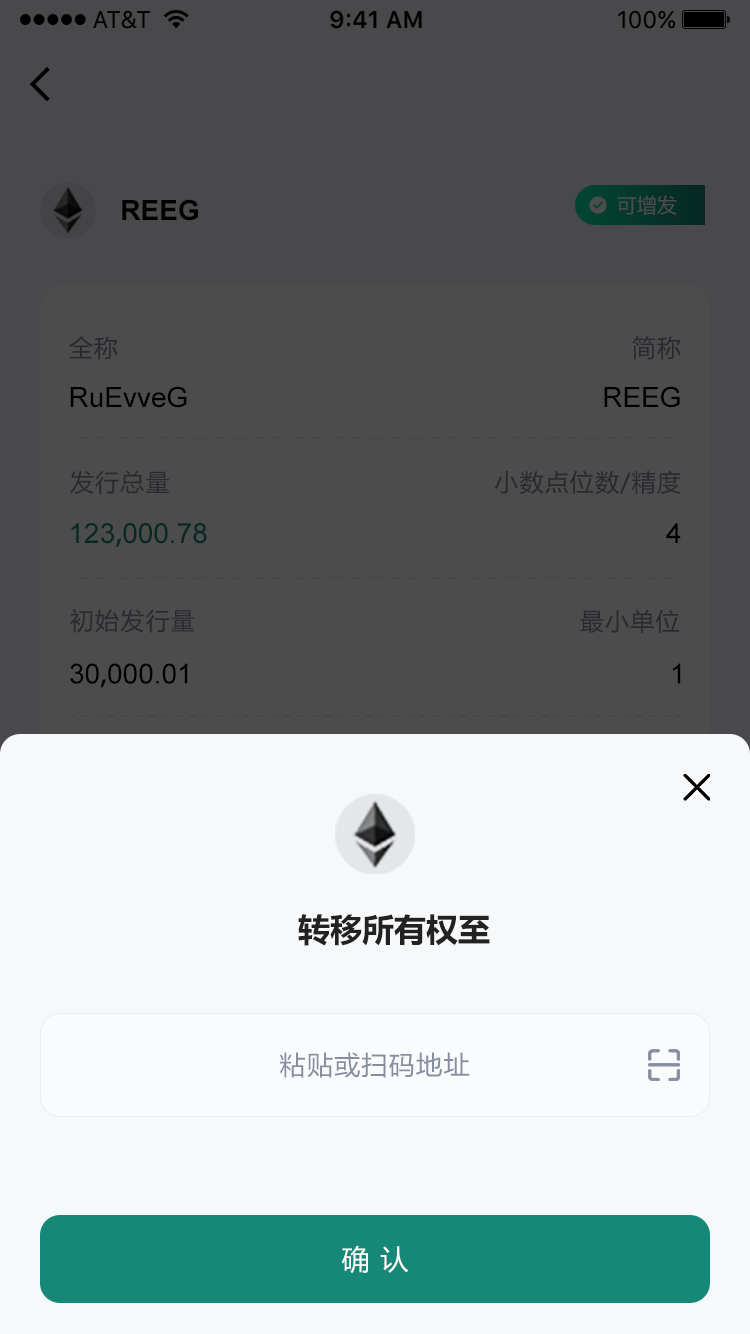
<style>
.page{position:relative;width:750px;height:1334px;background:#f7f8f9}
.page>*{position:absolute;margin:0}
.t1{font:20px "MicrosoftYaHei";color:#4c4c4c}
.t2{font:28px "Arial-BoldMT";color:#000000}
.t3{font:24px "MicrosoftYaHei";letter-spacing:0.05em;color:#282a2f}
.t4{font:28px "ArialMT";color:#000000}
.t5{font:28px "ArialMT";color:#062924}
.t6{font:28px "AdobeHeitiStd-Regular";color:#062924}
.t7{font:28px "AdobeHeitiStd-Regular";color:#000000}
.t8{font:32px "MicrosoftYaHei-Bold";color:#222222}
.t9{font:26px "MicrosoftYaHei";letter-spacing:0.05em;color:#878e9f}
.t10{font:28px "MicrosoftYaHei";letter-spacing:0.05em;color:#ffffff}
</style>
<div class="page">
<p class="t1" style="left:617px;top:195px;width:60px;height:20px">可增发</p>
<p class="t2" style="left:122px;top:199px;width:76px;height:22px">REEG</p>
<p class="t3" style="left:69px;top:336px;width:49px;height:24px">全称</p>
<p class="t3" style="left:632px;top:336px;width:49px;height:24px">简称</p>
<p class="t4" style="left:70px;top:386px;width:117px;height:22px">RuEvveG</p>
<p class="t4" style="left:604px;top:386px;width:76px;height:22px">REEG</p>
<p class="t3" style="left:70px;top:470px;width:99px;height:24px">发行总量</p>
<p class="t3" style="left:494px;top:470px;width:187px;height:25px">小数点位数/精度</p>
<p class="t5" style="left:71px;top:523px;width:136px;height:24px">123<span class="t6">,</span>000.78</p>
<p class="t4" style="left:666px;top:523px;width:15px;height:20px">4</p>
<p class="t3" style="left:70px;top:609px;width:125px;height:24px">初始发行量</p>
<p class="t3" style="left:580px;top:609px;width:99px;height:24px">最小单位</p>
<p class="t4" style="left:70px;top:663px;width:118px;height:25px">30<span class="t7">,</span>000.01</p>
<p class="t4" style="left:673px;top:663px;width:8px;height:21px">1</p>
<p class="t8" style="left:298px;top:914px;width:192px;height:32px">转移所有权至</p>
<p class="t9" style="left:280px;top:1052px;width:190px;height:26px">粘贴或扫码地址</p>
<p class="t10" style="left:341px;top:1245px;width:68px;height:29px">确 认</p>
</div>
